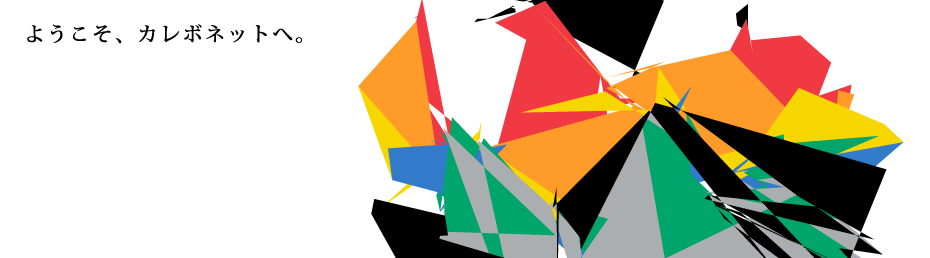
<style>
.page{position:relative;width:930px;height:258px;background:#ffffff}
.page>*{position:absolute;margin:0}
.t1{font:20px "KozMinPr6N-Medium";letter-spacing:0.1em;color:#000000;font-weight:bold}
</style>
<div class="page">
<p class="t1" style="left:27px;top:24px;width:275px;height:20px">ようこそ、カレボネットへ。</p>
</div>
